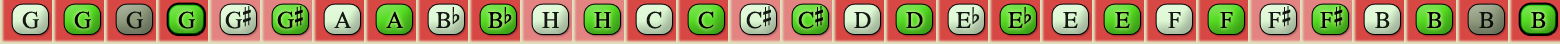
<style>
.page{position:relative;width:1560px;height:44px}
.page>*{position:absolute;margin:0}
.t1{font:24px "OpusChords";letter-spacing:-0.025em;color:#000000}
.t2{font:24px "OpusChords";color:#000000}
</style>
<div class="page">
<p class="t1" style="left:225px;top:6px;width:26px;height:23px;opacity:0.9">G#</p>
<p class="t1" style="left:277px;top:6px;width:26px;height:23px">G#</p>
<p class="t2" style="left:746px;top:6px;width:25px;height:23px;opacity:0.9">C#</p>
<p class="t2" style="left:798px;top:6px;width:25px;height:23px">C#</p>
<p class="t2" style="left:1268px;top:6px;width:23px;height:22px;opacity:0.9">F#</p>
<p class="t2" style="left:1320px;top:6px;width:23px;height:22px">F#</p>
<p class="t2" style="left:22px;top:11px;width:17px;height:18px;opacity:0.9">G</p>
<p class="t2" style="left:74px;top:11px;width:17px;height:18px">G</p>
<p class="t2" style="left:126px;top:11px;width:17px;height:18px;opacity:0.9">G</p>
<p class="t2" style="left:178px;top:11px;width:17px;height:18px">G</p>
<p class="t2" style="left:334px;top:11px;width:17px;height:17px;opacity:0.9">A</p>
<p class="t2" style="left:386px;top:11px;width:17px;height:17px">A</p>
<p class="t2" style="left:436px;top:7px;width:24px;height:21px;opacity:0.9">Bb</p>
<p class="t2" style="left:488px;top:7px;width:24px;height:21px">Bb</p>
<p class="t2" style="left:542px;top:12px;width:17px;height:16px;opacity:0.9">H</p>
<p class="t2" style="left:594px;top:12px;width:17px;height:16px">H</p>
<p class="t2" style="left:646px;top:11px;width:16px;height:18px;opacity:0.9">C</p>
<p class="t2" style="left:698px;top:11px;width:16px;height:18px">C</p>
<p class="t2" style="left:854px;top:12px;width:17px;height:16px;opacity:0.9">D</p>
<p class="t2" style="left:906px;top:12px;width:17px;height:16px">D</p>
<p class="t2" style="left:956px;top:7px;width:24px;height:21px;opacity:0.9">Eb</p>
<p class="t2" style="left:1008px;top:7px;width:24px;height:21px">Eb</p>
<p class="t2" style="left:1063px;top:12px;width:15px;height:16px;opacity:0.9">E</p>
<p class="t2" style="left:1115px;top:12px;width:15px;height:16px">E</p>
<p class="t2" style="left:1168px;top:12px;width:13px;height:16px;opacity:0.9">F</p>
<p class="t2" style="left:1220px;top:12px;width:13px;height:16px">F</p>
<p class="t2" style="left:1375px;top:12px;width:15px;height:16px;opacity:0.9">B</p>
<p class="t2" style="left:1427px;top:12px;width:15px;height:16px">B</p>
<p class="t2" style="left:1479px;top:12px;width:15px;height:16px;opacity:0.9">B</p>
<p class="t2" style="left:1531px;top:12px;width:15px;height:16px">B</p>
</div>
